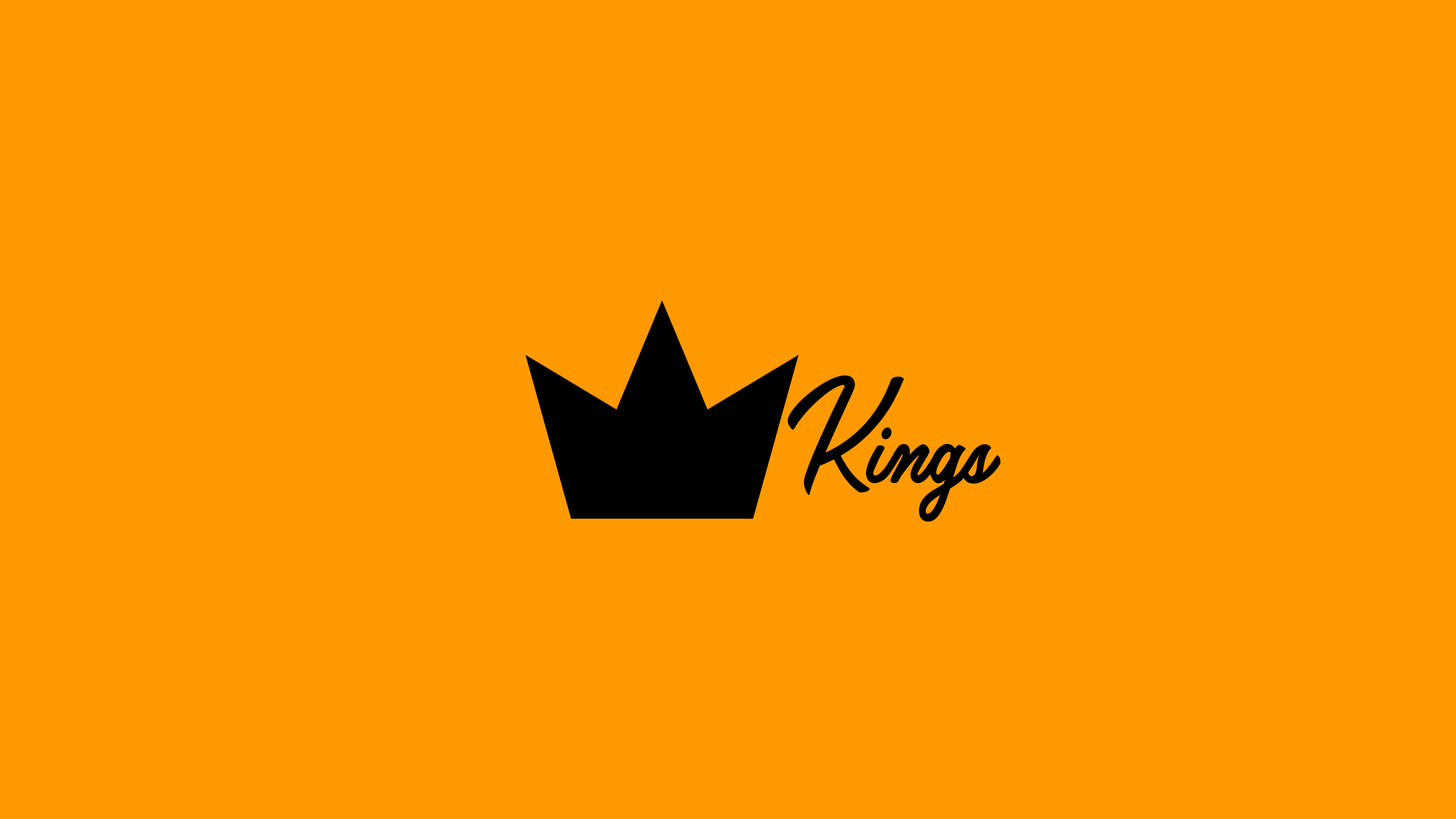
<style>
.page{position:relative;width:1456px;height:819px;background:#ff9900}
.page>*{position:absolute;margin:0}
.t1{font:113.7px "ClaudiaPersonalUse-Regular";color:#000000}
</style>
<div class="page">
<p class="t1" style="left:788px;top:375px;width:213px;height:147px">Kings</p>
</div>
